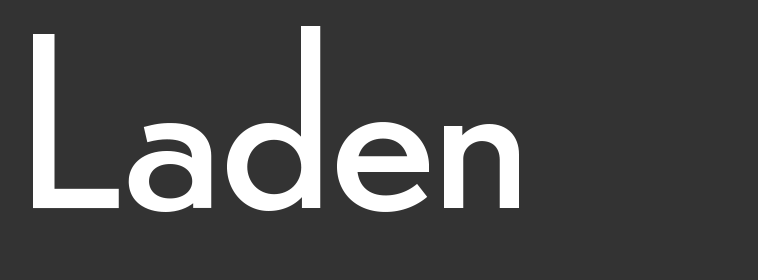
<style>
.page{position:relative;width:758px;height:280px;background:#333333}
.page>*{position:absolute;margin:0}
.t1{font:233.7px "DunbarLow-Book";color:#ffffff}
</style>
<div class="page">
<p class="t1" style="left:33px;top:26px;width:486px;height:186px">Laden</p>
</div>
